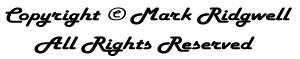
<style>
.page{position:relative;width:300px;height:59px;background:#ffffff}
.page>*{position:absolute;margin:0}
.t1{font:19px/29.2px "HarlowSolid";color:#000000;scale:1.35 1}
</style>
<div class="page">
<p class="t1" style="left:5px;top:7px;width:287px;height:49px;text-align:center">Copyright © Mark Ridgwell<br>All Rights Reserved</p>
</div>
